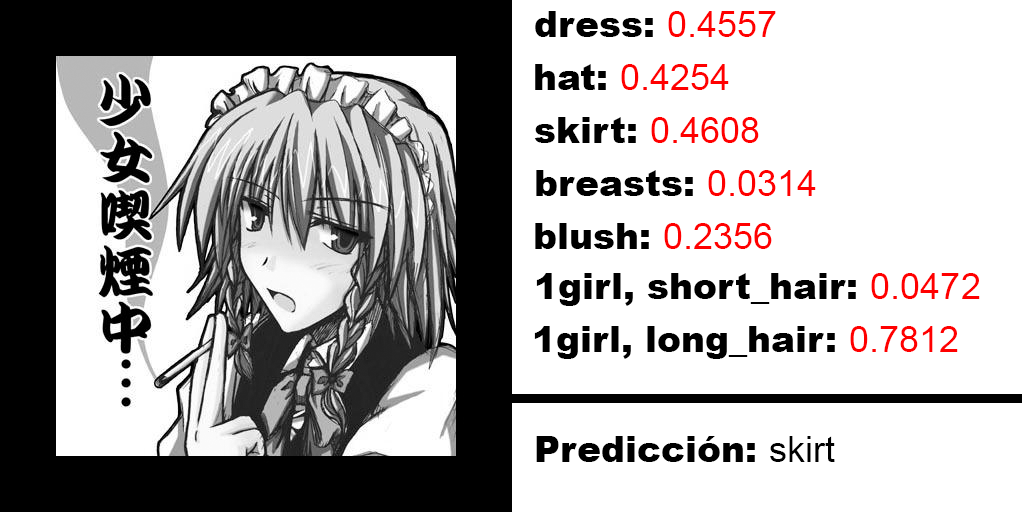
<style>
.page{position:relative;width:1022px;height:512px;background:#ffffff}
.page>*{position:absolute;margin:0}
.t1{font:36px "Arial-Black";color:#000000}
.t2{font:36px "ArialMT";color:#ff0000}
.t3{font:36px "ArialMT";color:#000000}
</style>
<div class="page">
<p class="t1" style="left:535px;top:11px;width:241px;height:26px">dress: <span class="t2">0.4557</span></p>
<p class="t2" style="left:535px;top:64px;width:194px;height:26px"><span class="t1">hat: </span>0.4254</p>
<p class="t1" style="left:534px;top:117px;width:225px;height:26px">skirt: <span class="t2">0.4608</span></p>
<p class="t1" style="left:536px;top:170px;width:280px;height:26px">breasts: <span class="t2">0.0314</span></p>
<p class="t1" style="left:535px;top:223px;width:237px;height:26px">blush: <span class="t2">0.2356</span></p>
<p class="t1" style="left:536px;top:273px;width:444px;height:33px">1girl, short_hair: <span class="t2">0.0472</span></p>
<p class="t1" style="left:534px;top:326px;width:424px;height:33px">1girl, long_hair: <span class="t2">0.7812</span></p>
<p class="t1" style="left:536px;top:436px;width:299px;height:26px">Predicción: <span class="t3">skirt</span></p>
</div>
